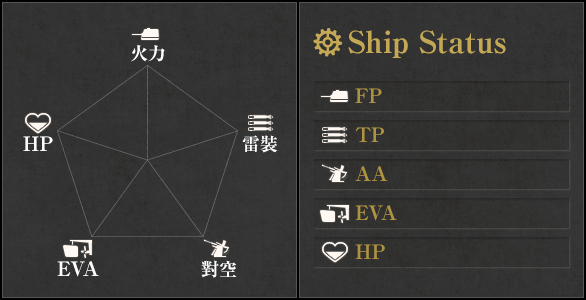
<style>
.page{position:relative;width:586px;height:300px}
.page>*{position:absolute;margin:0}
.t1{font:30px "RyuminPro-ExBold";color:#c3a856}
.t2{font:18px "RyuminPro-ExBold";color:#ffffff}
.t3{font:20px/39px "RyuminPro-ExBold";color:#ae9442}
.t4{font:20px "RyuminPro-ExBold";color:#ffffff}
</style>
<div class="page">
<p class="t1" style="left:348px;top:30px;width:158px;height:28px">Ship Status</p>
<p class="t2" style="left:131px;top:45px;width:34px;height:17px">火力</p>
<p class="t3" style="left:355px;top:88px;width:42px;height:171px">FP<br>TP<br>AA<br>EVA<br>HP</p>
<p class="t4" style="left:23px;top:136px;width:30px;height:15px">HP</p>
<p class="t2" style="left:242px;top:135px;width:36px;height:18px">雷裝</p>
<p class="t4" style="left:57px;top:261px;width:42px;height:16px">EVA</p>
<p class="t2" style="left:201px;top:260px;width:36px;height:18px">對空</p>
</div>
